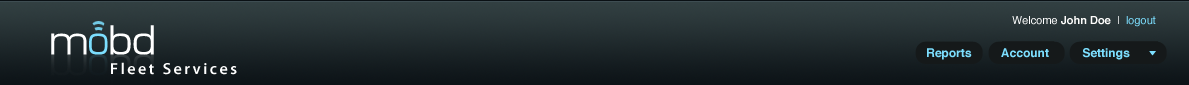
<style>
.page{position:relative;width:1189px;height:85px}
.page>*{position:absolute;margin:0}
.t1{font:11px "Helvetica-Bold";color:#fefdfc}
.t2{font:11px "Helvetica";color:#ffffff}
.t3{font:11px "Helvetica";color:#7cdefe}
.t4{font:41.9px "Microlla";letter-spacing:-0.025em;color:#ffffff}
.t5{font:41.9px "Microlla";letter-spacing:-0.025em;color:#7cdefe}
.t6{font:12px "Helvetica-Bold";color:#7cdefe}
.t7{font:16px "MyriadPro-Semibold";letter-spacing:-0.025em;color:#ffffff}
</style>
<div class="page">
<p class="t1" style="left:1012px;top:16px;width:144px;height:11px"><span class="t2">Welcome </span>John Doe<span class="t2">  | </span><span class="t3"> logout</span></p>
<p class="t4" style="left:51px;top:25px;width:103px;height:30px">m<span class="t5">o</span>bd</p>
<p class="t6" style="left:927px;top:48px;width:203px;height:12px">Reports         Account          Settings</p>
<p class="t7" style="left:111px;top:62px;width:126px;height:13px">F l e e t   S e r v i c e s</p>
</div>
